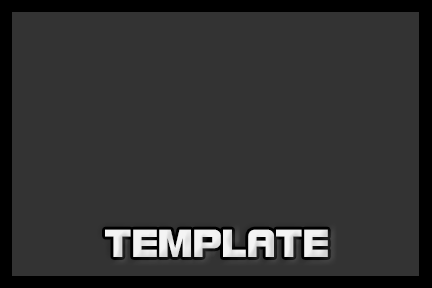
<style>
.page{position:relative;width:432px;height:288px;background:#333333}
.page>*{position:absolute;margin:0}
.t1{font:41.7px "BolsterBold";color:#f3f3f3}
</style>
<div class="page">
<p class="t1" style="left:105px;top:229px;width:223px;height:28px">TEMPLATE</p>
</div>
